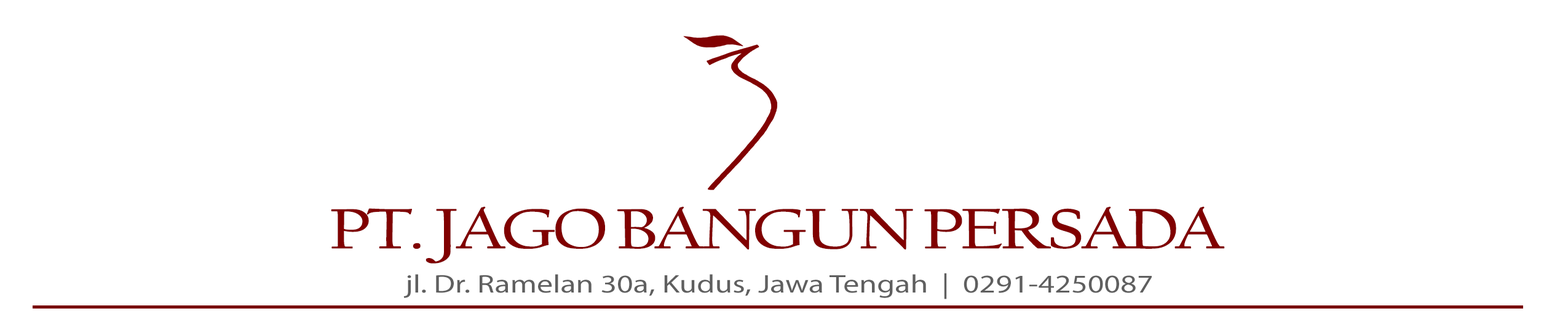
<style>
.page{position:relative;width:1568px;height:327px;background:#ffffff}
.page>*{position:absolute;margin:0}
.t1{font:58.7px "CalifornianFB-Reg";letter-spacing:-0.08em;color:#800000;text-transform:uppercase;font-weight:bold;scale:1.29 1}
.t2{font:25.6px "MyriadPro-Regular";color:#5f5f5f;scale:1.25 1}
</style>
<div class="page">
<p class="t1" style="left:331px;top:206px;width:894px;height:57px">PT. Jago Bangun Persada</p>
<p class="t2" style="left:403px;top:272px;width:749px;height:27px">jl. Dr. Ramelan 30a, Kudus, Jawa Tengah  |  0291-4250087</p>
</div>
